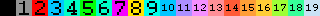
<style>
.page{position:relative;width:320px;height:16px}
.page>*{position:absolute;margin:0}
.t1{font:22.9px "Courier";color:#000000;scale:1.3 1}
.t2{font:9px "Courier";color:#000000;scale:1.3 1}
</style>
<div class="page">
<p class="t1" style="left:19px;top:1px;width:10px;height:14px">1</p>
<p class="t1" style="left:35px;top:1px;width:10px;height:14px">2</p>
<p class="t1" style="left:51px;top:1px;width:10px;height:14px">3</p>
<p class="t1" style="left:67px;top:1px;width:10px;height:14px">4</p>
<p class="t1" style="left:83px;top:1px;width:10px;height:14px">5</p>
<p class="t1" style="left:99px;top:1px;width:10px;height:14px">6</p>
<p class="t1" style="left:115px;top:1px;width:10px;height:14px">7</p>
<p class="t1" style="left:131px;top:1px;width:10px;height:14px">8</p>
<p class="t1" style="left:147px;top:1px;width:10px;height:14px">9</p>
<p class="t2" style="left:162px;top:4px;width:12px;height:7px">10</p>
<p class="t2" style="left:178px;top:4px;width:12px;height:7px">11</p>
<p class="t2" style="left:194px;top:4px;width:12px;height:7px">12</p>
<p class="t2" style="left:210px;top:4px;width:12px;height:7px">13</p>
<p class="t2" style="left:242px;top:4px;width:12px;height:7px">15</p>
<p class="t2" style="left:258px;top:4px;width:12px;height:7px">16</p>
<p class="t2" style="left:274px;top:4px;width:12px;height:7px">17</p>
<p class="t2" style="left:290px;top:4px;width:12px;height:7px">18</p>
<p class="t2" style="left:306px;top:4px;width:12px;height:7px">19</p>
</div>
